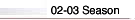
<style>
.page{position:relative;width:135px;height:20px;background:#ffffff}
.page>*{position:absolute;margin:0}
.t1{font:11px "Helvetica";color:#000000}
</style>
<div class="page">
<p class="t1" style="left:51px;top:5px;width:68px;height:10px">02-03 Season</p>
</div>
